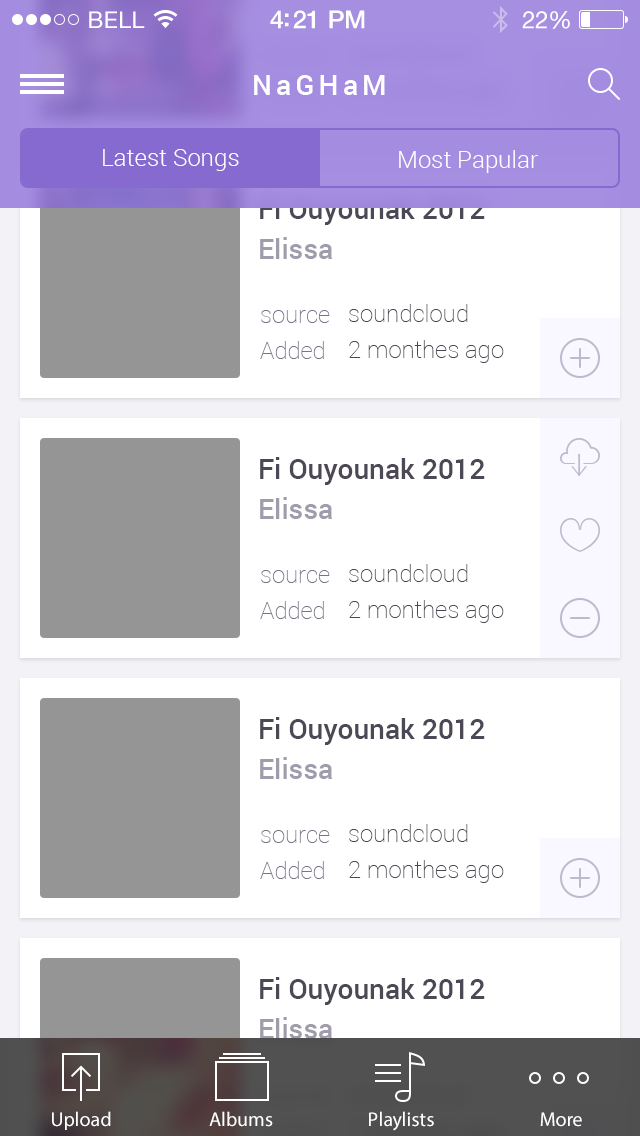
<style>
.page{position:relative;width:640px;height:1136px;background:#ffffff}
.page>*{position:absolute;margin:0}
.t1{font:23px "HelveticaNeue";letter-spacing:0.02em;color:#ffffff}
.t2{font:25px "HelveticaNeue-Medium";letter-spacing:-0.02em;color:#ffffff}
.t3{font:24px "HelveticaNeue";letter-spacing:-0.02em;color:#ffffff}
.t4{font:28px "Roboto-Medium";letter-spacing:0.15em;color:#ffffff}
.t5{font:24px "Roboto-Light";color:#ffffff}
.t6{font:28px "Roboto-Medium";color:#4c4855}
.t7{font:28px "Roboto-Medium";color:#a09cab}
.t8{font:24px/36px "Roboto-Thin";color:#4a4751}
.t9{font:24px/36px "Roboto-Thin";color:#797388}
.t10{font:20px "MyriadPro-Regular";color:#ffffff}
</style>
<div class="page">
<p class="t1" style="left:89px;top:11px;width:56px;height:17px">BELL</p>
<p class="t2" style="left:270px;top:10px;width:95px;height:19px">4:21 PM</p>
<p class="t3" style="left:522px;top:11px;width:48px;height:18px">22%</p>
<p class="t4" style="left:254px;top:75px;width:131px;height:20px">NaGHaM</p>
<p class="t5" style="left:103px;top:149px;width:136px;height:22px">Latest Songs</p>
<p class="t5" style="left:399px;top:150px;width:139px;height:23px">Most Papular</p>
<p class="t6" style="left:260px;top:197px;width:225px;height:28px">Fi Ouyounak 2012</p>
<p class="t7" style="left:260px;top:237px;width:72px;height:22px">Elissa</p>
<p class="t8" style="left:349px;top:304px;width:155px;height:59px">soundcloud<br>2 monthes ago</p>
<p class="t9" style="left:260px;top:310px;width:70px;height:49px">source<br>Added</p>
<p class="t6" style="left:260px;top:457px;width:225px;height:28px">Fi Ouyounak 2012</p>
<p class="t7" style="left:260px;top:497px;width:72px;height:22px">Elissa</p>
<p class="t8" style="left:349px;top:564px;width:155px;height:59px">soundcloud<br>2 monthes ago</p>
<p class="t9" style="left:260px;top:570px;width:70px;height:49px">source<br>Added</p>
<p class="t6" style="left:260px;top:717px;width:225px;height:28px">Fi Ouyounak 2012</p>
<p class="t7" style="left:260px;top:757px;width:72px;height:22px">Elissa</p>
<p class="t9" style="left:260px;top:830px;width:70px;height:49px">source<br>Added</p>
<p class="t8" style="left:349px;top:824px;width:155px;height:59px">soundcloud<br>2 monthes ago</p>
<p class="t6" style="left:260px;top:977px;width:225px;height:28px">Fi Ouyounak 2012</p>
<p class="t7" style="left:260px;top:1017px;width:72px;height:22px">Elissa</p>
<p class="t10" style="left:52px;top:1111px;width:59px;height:19px">Upload</p>
<p class="t10" style="left:209px;top:1111px;width:64px;height:16px">Albums</p>
<p class="t10" style="left:369px;top:1111px;width:65px;height:20px">Playlists</p>
<p class="t10" style="left:540px;top:1112px;width:42px;height:15px">More</p>
</div>
